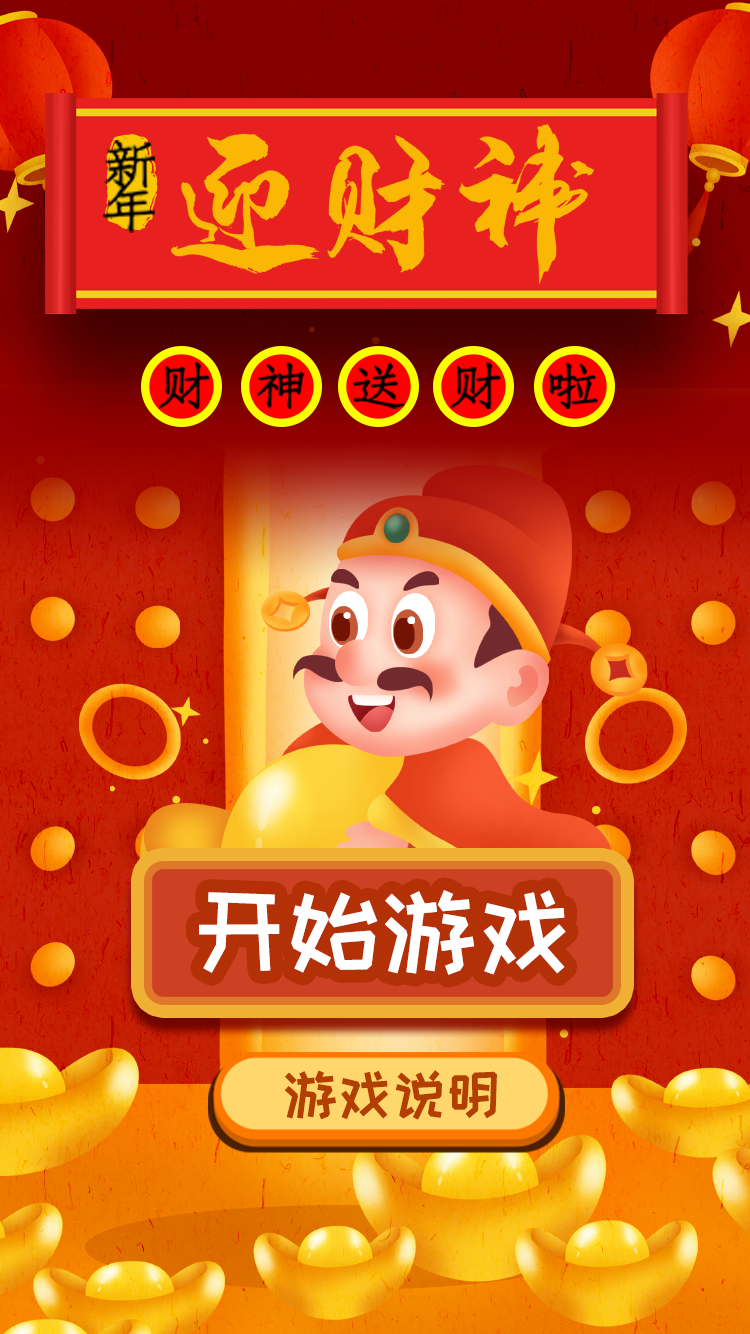
<style>
.page{position:relative;width:750px;height:1334px}
.page>*{position:absolute;margin:0}
.t1{font:178.6px "55--Regular";letter-spacing:-0.214em;color:#fab804;text-transform:uppercase}
.t2{font:55.9px "36--Regular";letter-spacing:-0.214em;color:#020202;text-transform:uppercase}
.t3{font:53.9px "36--Regular";letter-spacing:0.8em;color:#000000;text-transform:uppercase}
.t4{font:97.4px "HappyZcool-2016";letter-spacing:-0.05em;color:#ffffff;font-weight:bold}
.t5{font:55.8px "HappyZcool-2016";letter-spacing:-0.05em;color:#b23e00;font-weight:bold}
</style>
<div class="page">
<p class="t1" style="left:171px;top:124px;width:423px;height:160px">迎财神</p>
<p class="t2" style="left:103px;top:140px;width:52px;height:93px">新年</p>
<p class="t3" style="left:159px;top:362px;width:439px;height:47px">财神送财啦</p>
<p class="t4" style="left:199px;top:890px;width:367px;height:85px">开始游戏</p>
<p class="t5" style="left:284px;top:1070px;width:213px;height:50px">游戏说明</p>
</div>
